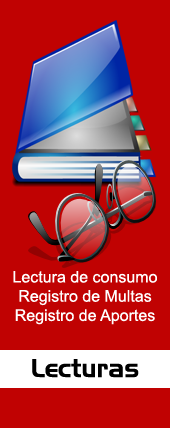
<style>
.page{position:relative;width:170px;height:428px;background:#c00202}
.page>*{position:absolute;margin:0}
.t1{font:16px "ArialMT";color:#ffffff}
.t2{font:25px "AeroRegularSWFTE";color:#000000}
</style>
<div class="page">
<p class="t1" style="left:13px;top:271px;width:144px;height:54px;text-align:center">Lectura de consumo<br>Registro de Multas<br>Registro de Aportes</p>
<p class="t2" style="left:32px;top:359px;width:107px;height:19px">Lecturas</p>
</div>
